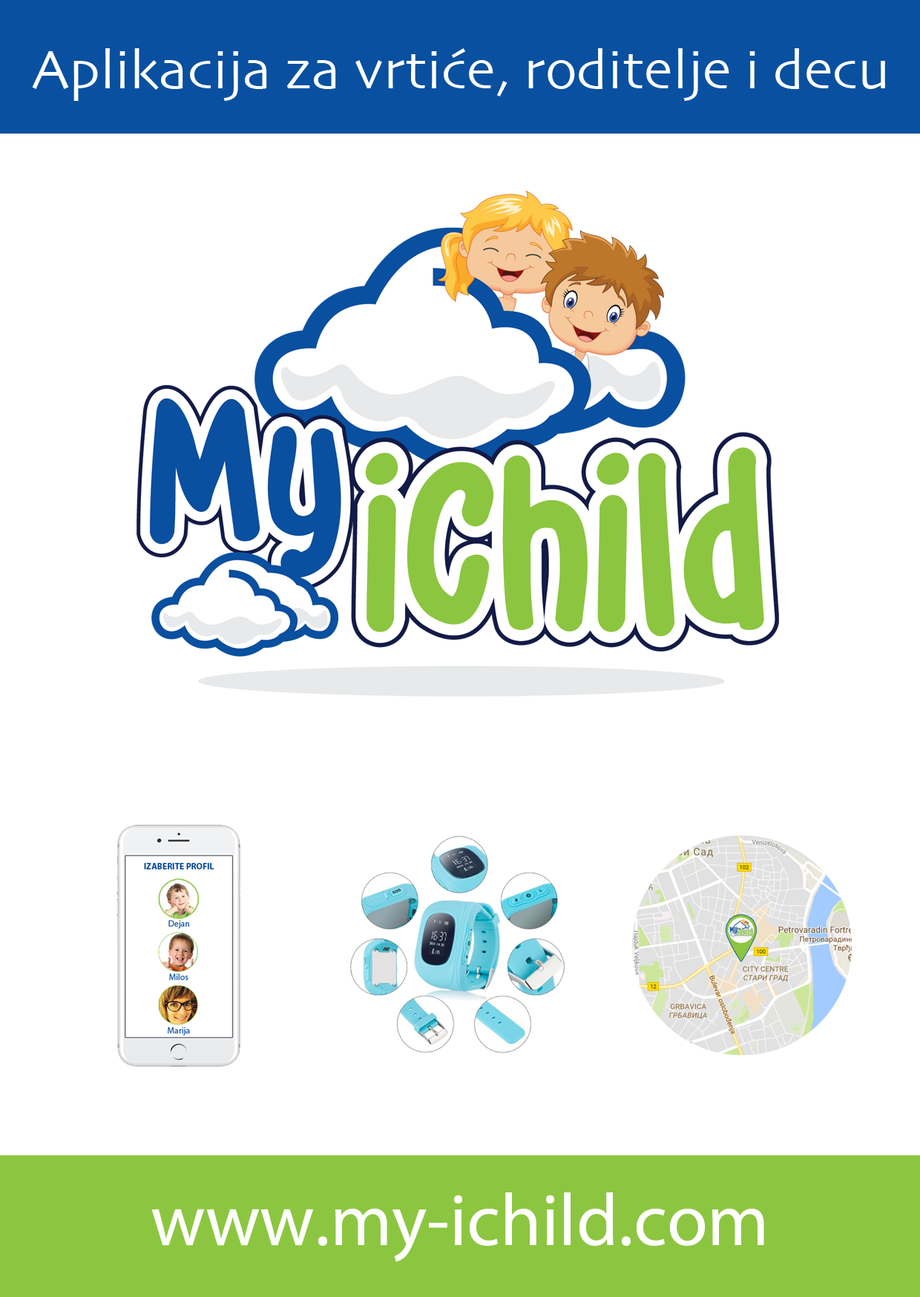
<style>
.page{position:relative;width:920px;height:1297px;background:#ffffff}
.page>*{position:absolute;margin:0}
.t1{font:55.6px "Skia-Regular";color:#ffffff}
.t2{font:74.2px "MyriadPro-Regular";color:#ffffff}
</style>
<div class="page">
<p class="t1" style="left:32px;top:48px;width:853px;height:53px">Aplikacija za vrtiće, roditelje i decu</p>
<p class="t2" style="left:151px;top:1192px;width:613px;height:70px">www.my-ichild.com</p>
</div>
